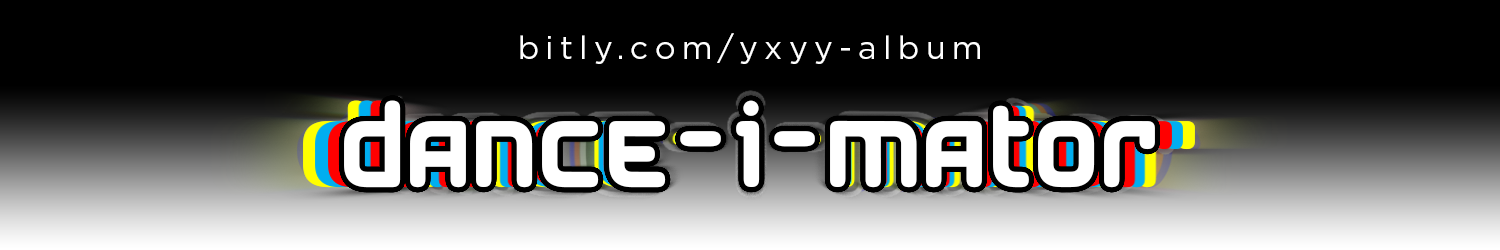
<style>
.page{position:relative;width:1500px;height:250px;background:#000000}
.page>*{position:absolute;margin:0}
.t1{font:32px "Gotham-Book";letter-spacing:0.2em;color:#ffffff}
.t2{font:104px "AirstripFour";color:#ffffff}
</style>
<div class="page">
<p class="t1" style="left:520px;top:33px;width:460px;height:31px">bitly.com/yxyy-album</p>
<p class="t2" style="left:344px;top:100px;width:811px;height:88px">DANCE-I-MATOR</p>
</div>
